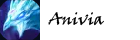
<style>
.page{position:relative;width:140px;height:40px;background:#ffffff}
.page>*{position:absolute;margin:0}
.t1{font:12px "VinerHandITC";color:#000000}
</style>
<div class="page">
<p class="t1" style="left:48px;top:12px;width:56px;height:14px">Anivia</p>
</div>
